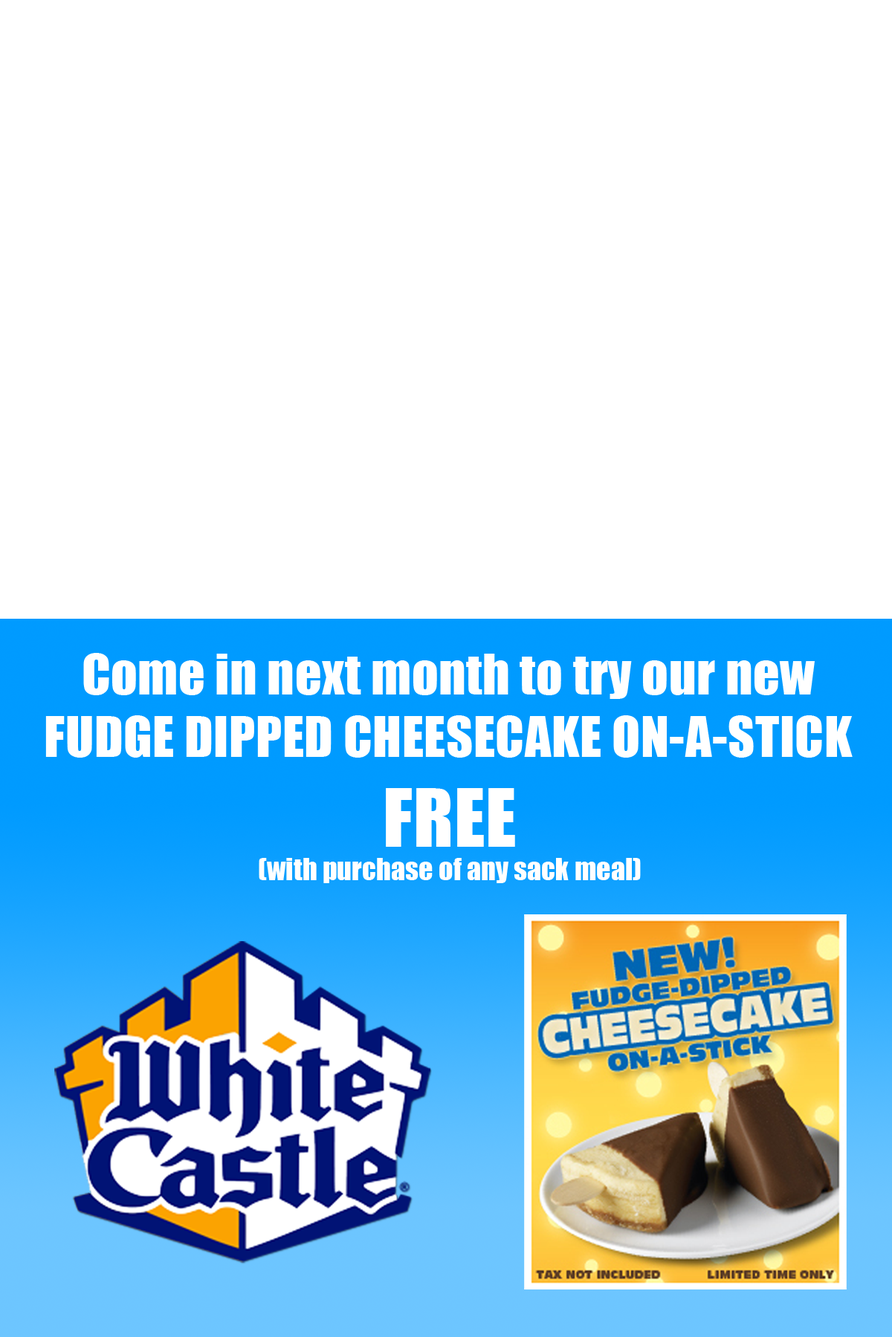
<style>
.page{position:relative;width:892px;height:1337px;background:#ffffff}
.page>*{position:absolute;margin:0}
.t1{font:51.9px "Impact";letter-spacing:0.01em;color:#ffffff}
.t2{font:27.9px "Impact";letter-spacing:0.01em;color:#ffffff}
.t3{font:74.3px "Impact";letter-spacing:0.01em;color:#ffffff}
</style>
<div class="page">
<p class="t1" style="left:45px;top:653px;width:807px;height:105px;text-align:center">Come in next month to try our new<br>FUDGE DIPPED CHEESECAKE ON-A-STICK</p>
<p class="t2" style="left:259px;top:788px;width:381px;height:95px;text-align:center"><span class="t3">FREE<br></span>(with purchase of any sack meal)</p>
</div>
